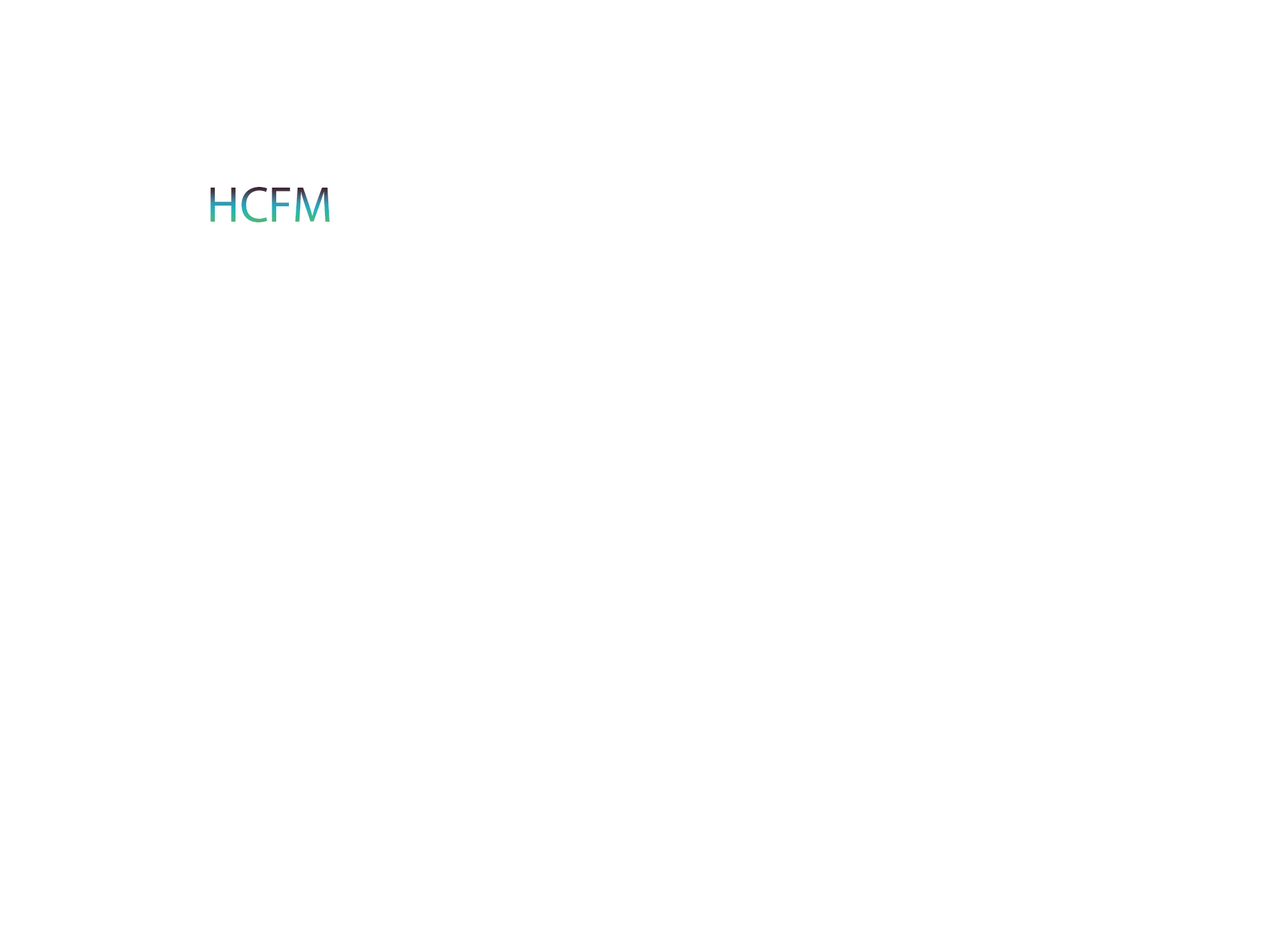
<style>
.page{position:relative;width:1261px;height:946px;background:#ffffff}
.page>*{position:absolute;margin:0}
.t1{font:50px "MyriadPro-Regular"}
</style>
<div class="page">
<p class="t1" style="left:210px;top:187px;width:120px;height:35px">HCFM</p>
</div>
